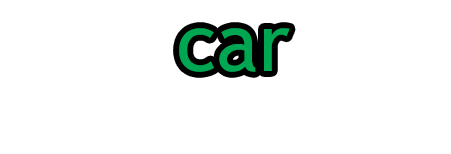
<style>
.page{position:relative;width:451px;height:154px;background:#ffffff}
.page>*{position:absolute;margin:0}
.t1{font:80px "TrebuchetMS";color:#00a651}
</style>
<div class="page">
<p class="t1" style="left:179px;top:28px;width:111px;height:44px">car</p>
</div>
